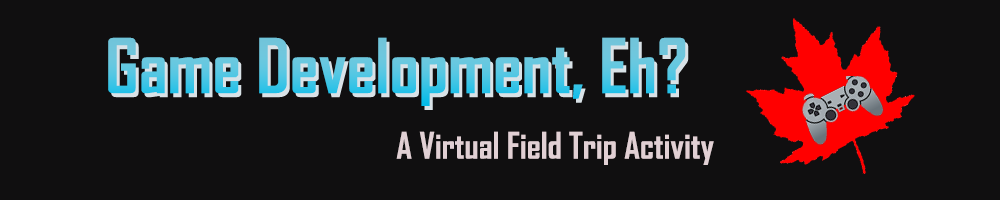
<style>
.page{position:relative;width:1000px;height:200px;background:#100f10}
.page>*{position:absolute;margin:0}
.t1{font:72px "AgencyFB-Bold"}
.t2{font:35px "AgencyFB-Bold";color:#e1d0d4}
</style>
<div class="page">
<p class="t1" style="left:108px;top:37px;width:578px;height:69px">Game Development, Eh?</p>
<p class="t2" style="left:396px;top:131px;width:318px;height:34px">A Virtual Field Trip Activity</p>
</div>
